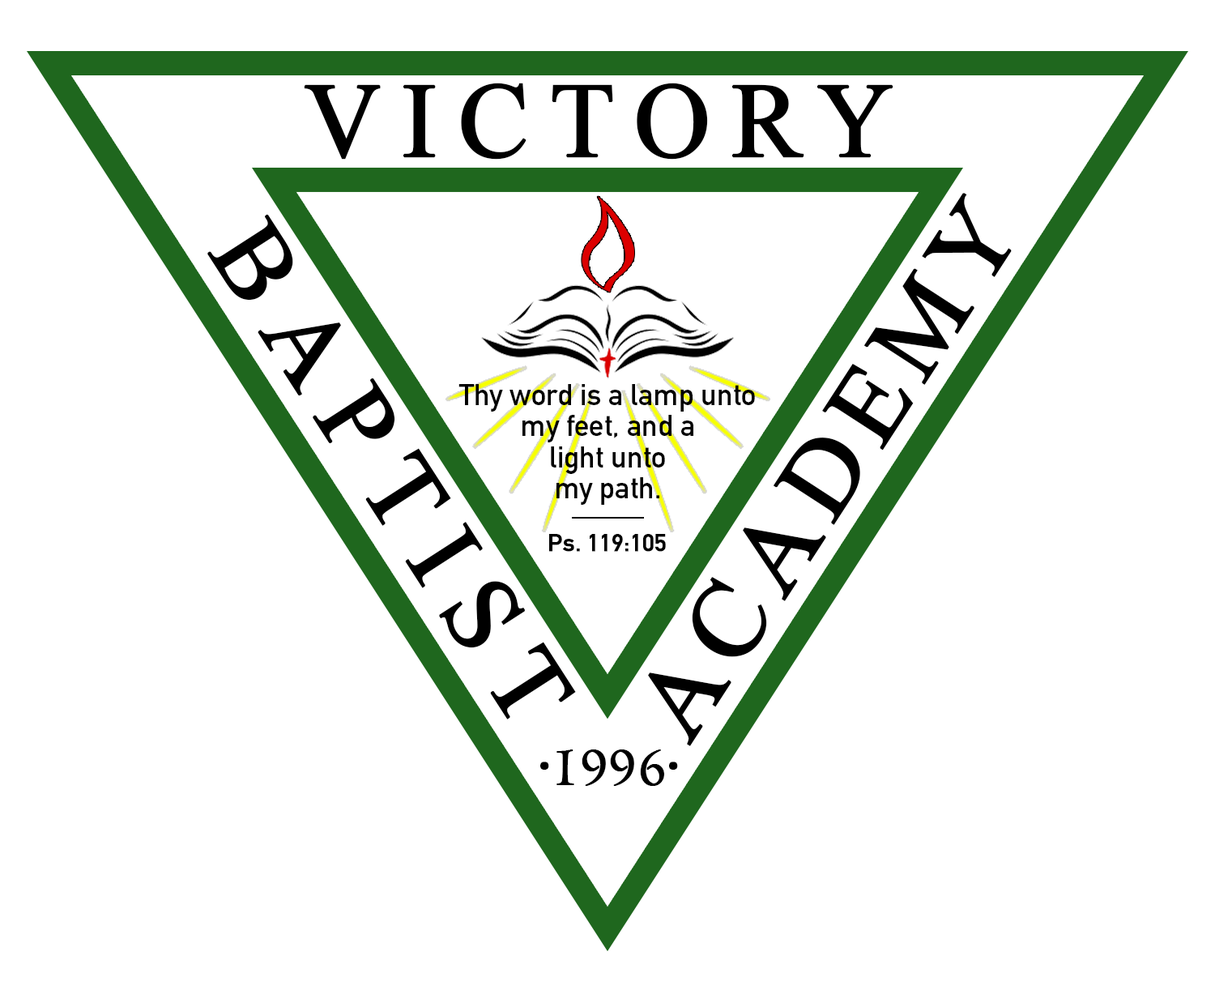
<style>
.page{position:relative;width:1215px;height:982px;background:#ffffff}
.page>*{position:absolute;margin:0}
.t1{font:105.4px "TimesNewRomanPSMT";letter-spacing:0.175em;color:#000000;text-transform:uppercase;font-weight:bold}
.t2{font:106px "TimesNewRomanPSMT";letter-spacing:0.095em;color:#000000;text-transform:uppercase;font-weight:bold}
.t3{font:106px "TimesNewRomanPSMT";letter-spacing:0.195em;color:#000000;text-transform:uppercase;font-weight:bold}
.t4{font:29.8px/31px "DINMittelschriftStd";color:#000000}
.t5{font:23.9px "DINMittelschriftStd";color:#000000;font-weight:bold}
.t6{font:55.9px "Centaur";color:#000000;text-transform:uppercase;font-weight:bold}
.t7{font:55.9px "MyriadPro-Regular";color:#000000;text-transform:uppercase;font-weight:bold}
</style>
<div class="page">
<p class="t1" style="left:304px;top:83px;width:589px;height:77px">Victory</p>
<p class="t2" style="left:648px;top:193px;width:364px;height:553px;rotate:-57deg">academy</p>
<p class="t3" style="left:207px;top:214px;width:369px;height:505px;rotate:57deg">baptist</p>
<p class="t4" style="left:458px;top:384px;width:297px;height:121px;text-align:center">Thy word is a lamp unto<br>my feet, and a<br>light unto<br>my path.</p>
<p class="t5" style="left:549px;top:534px;width:117px;height:18px">Ps. 119:105</p>
<p class="t6" style="left:540px;top:749px;width:138px;height:37px"><span class="t7">·</span>1996<span class="t7">·</span></p>
</div>
